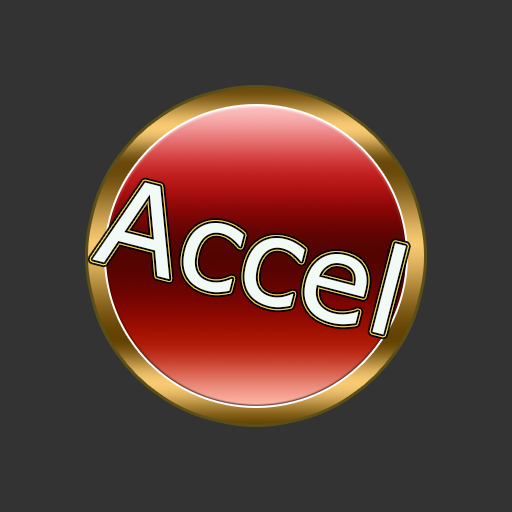
<style>
.page{position:relative;width:512px;height:512px;background:#333333}
.page>*{position:absolute;margin:0}
.t1{font:120.2px "MSReferenceSansSerif";color:#f1faf5}
</style>
<div class="page">
<p class="t1" style="left:92px;top:182px;width:314px;height:153px;rotate:14deg">Accel</p>
</div>
